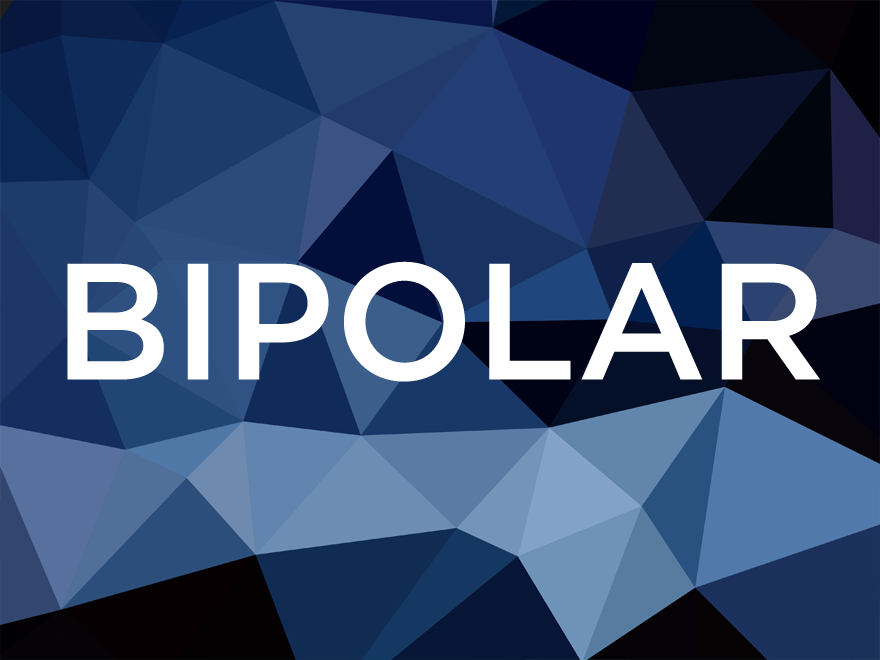
<style>
.page{position:relative;width:880px;height:660px}
.page>*{position:absolute;margin:0}
.t1{font:165px "GothamMedium";color:#ffffff}
</style>
<div class="page">
<p class="t1" style="left:67px;top:261px;width:753px;height:121px">BIPOLAR</p>
</div>
